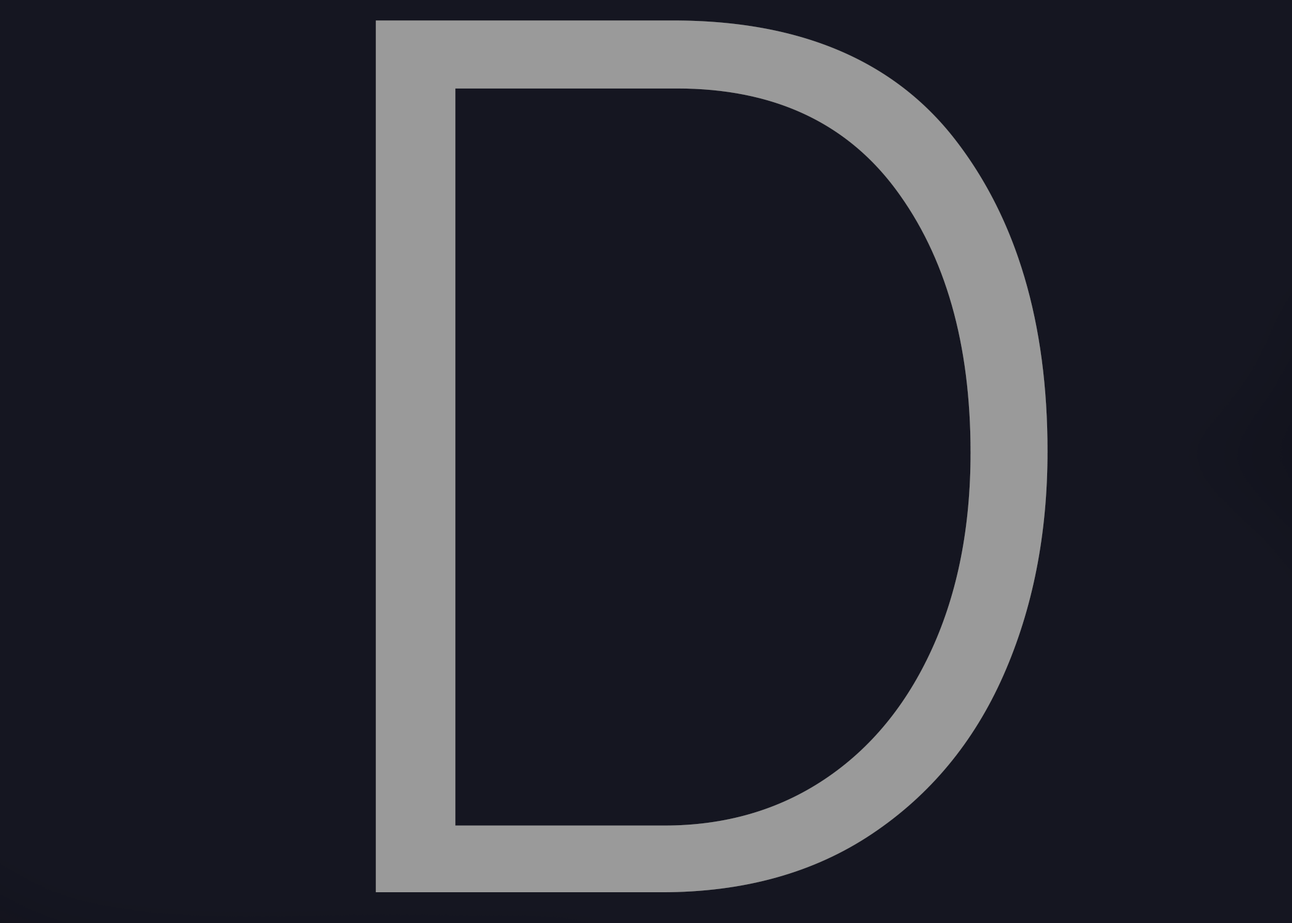
<style>
.page{position:relative;width:1292px;height:923px;background:#151621}
.page>*{position:absolute;margin:0}
.t1{font:1281.8px "Catamaran-Light";color:#9a9a9a}
</style>
<div class="page">
<p class="t1" style="left:375px;top:20px;width:673px;height:872px">D</p>
</div>
